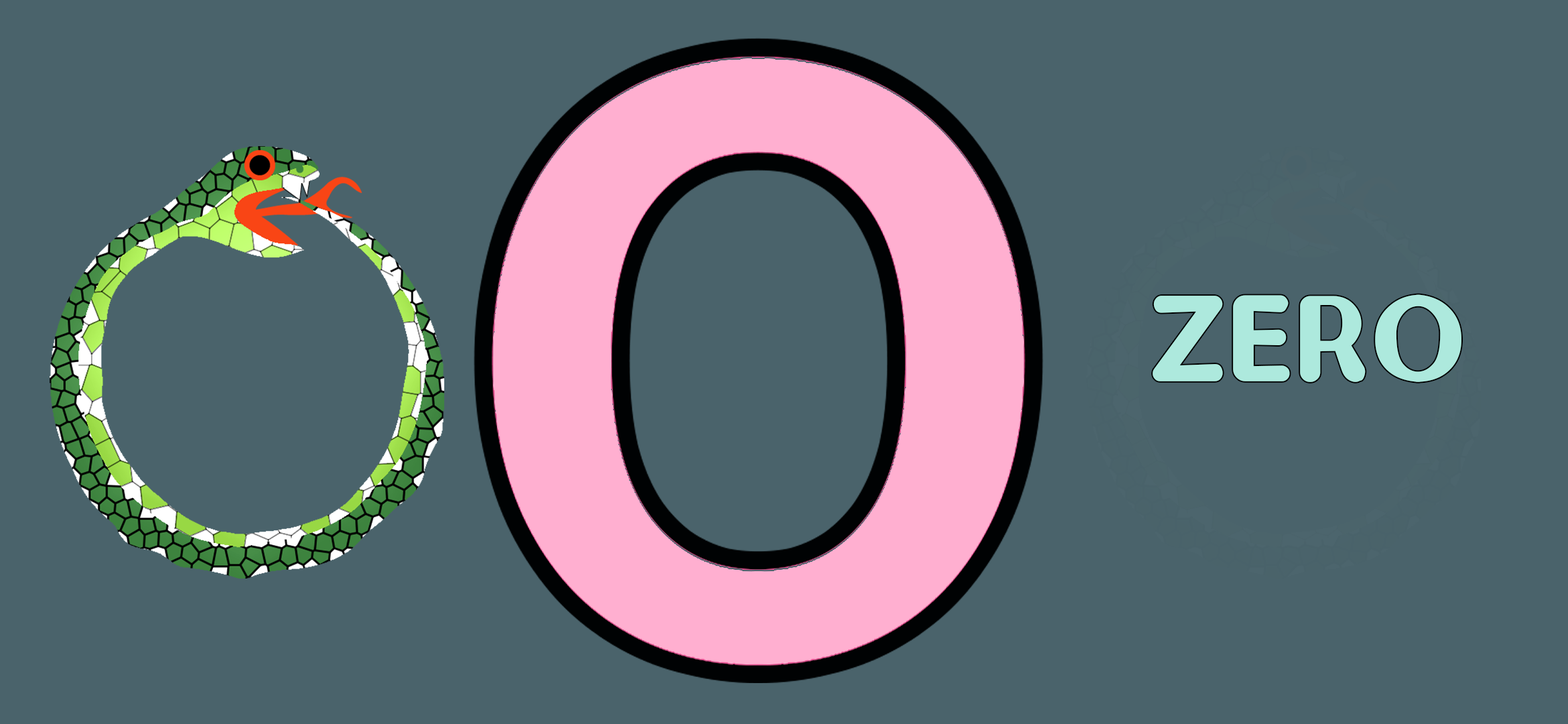
<style>
.page{position:relative;width:1568px;height:724px;background:#4a636b}
.page>*{position:absolute;margin:0}
.t1{font:139.6px "Dyuthi";color:#ade9dd}
</style>
<div class="page">
<p class="t1" style="left:1153px;top:294px;width:308px;height:88px">ZERO</p>
</div>
